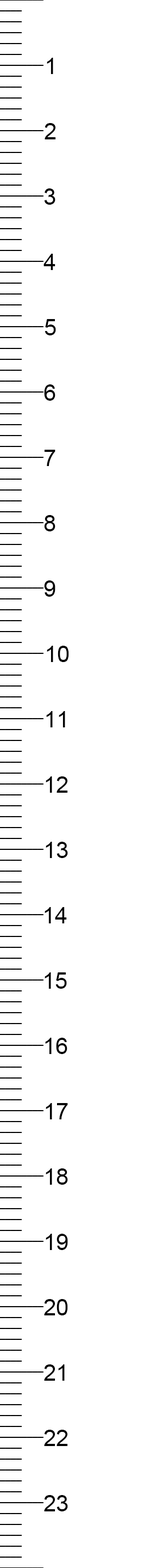
<style>
.page{position:relative;width:163px;height:1568px;background:#ffffff}
.page>*{position:absolute;margin:0}
.t1{font:22.7px "ArialMT";color:#000000}
</style>
<div class="page">
<p class="t1" style="left:47px;top:58px;width:6px;height:16px">1</p>
<p class="t1" style="left:45px;top:123px;width:11px;height:16px">2</p>
<p class="t1" style="left:44px;top:188px;width:12px;height:17px">3</p>
<p class="t1" style="left:44px;top:254px;width:12px;height:16px">4</p>
<p class="t1" style="left:45px;top:319px;width:11px;height:16px">5</p>
<p class="t1" style="left:44px;top:384px;width:12px;height:17px">6</p>
<p class="t1" style="left:45px;top:450px;width:11px;height:16px">7</p>
<p class="t1" style="left:44px;top:515px;width:12px;height:16px">8</p>
<p class="t1" style="left:44px;top:580px;width:12px;height:17px">9</p>
<p class="t1" style="left:47px;top:646px;width:22px;height:16px">10</p>
<p class="t1" style="left:46px;top:711px;width:19px;height:16px">11</p>
<p class="t1" style="left:46px;top:776px;width:22px;height:17px">12</p>
<p class="t1" style="left:46px;top:842px;width:22px;height:16px">13</p>
<p class="t1" style="left:45px;top:907px;width:22px;height:16px">14</p>
<p class="t1" style="left:45px;top:972px;width:22px;height:17px">15</p>
<p class="t1" style="left:45px;top:1038px;width:23px;height:16px">16</p>
<p class="t1" style="left:46px;top:1103px;width:22px;height:16px">17</p>
<p class="t1" style="left:46px;top:1168px;width:22px;height:17px">18</p>
<p class="t1" style="left:46px;top:1234px;width:22px;height:16px">19</p>
<p class="t1" style="left:44px;top:1299px;width:24px;height:16px">20</p>
<p class="t1" style="left:44px;top:1364px;width:21px;height:17px">21</p>
<p class="t1" style="left:44px;top:1430px;width:24px;height:16px">22</p>
<p class="t1" style="left:44px;top:1495px;width:24px;height:16px">23</p>
</div>
